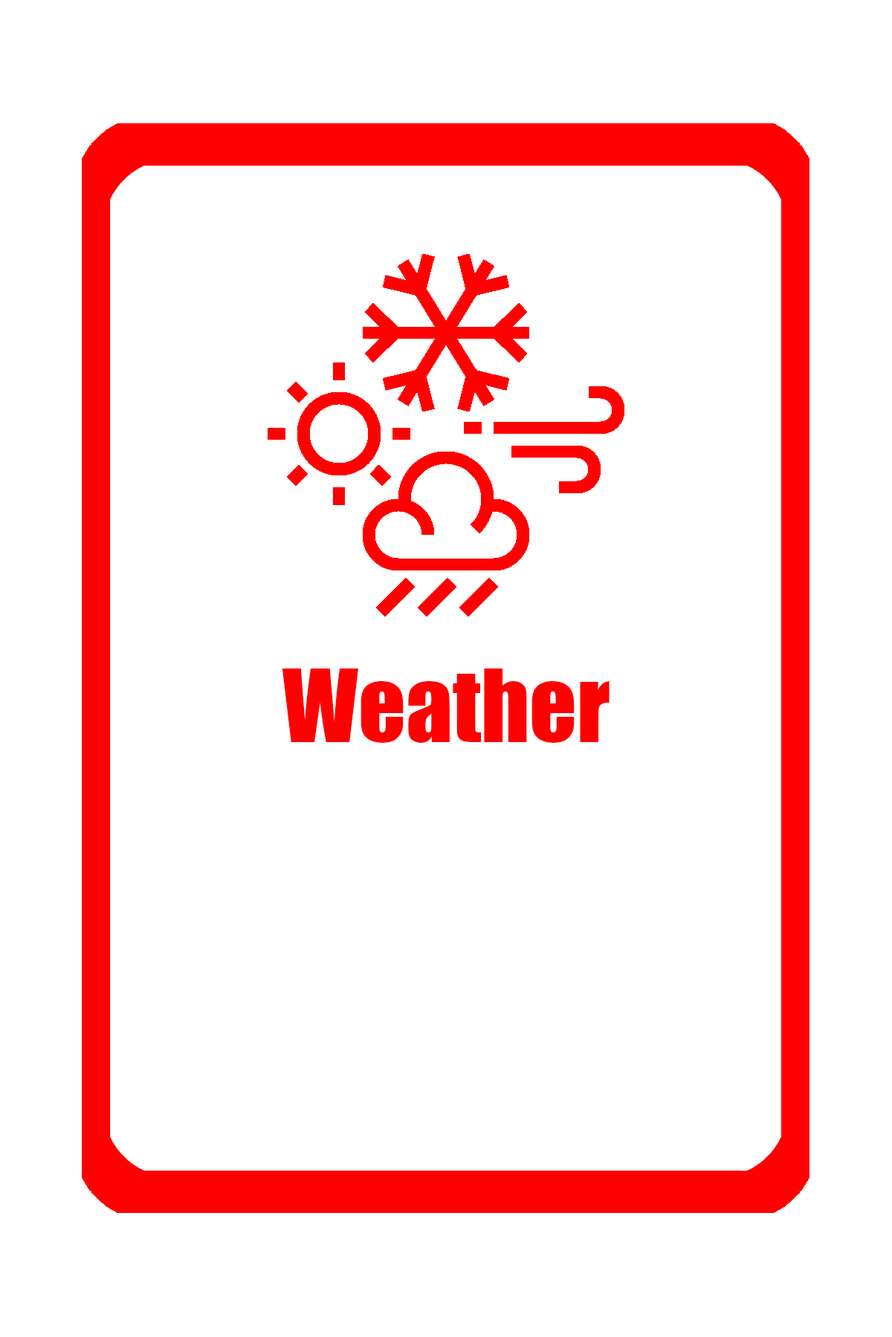
<style>
.page{position:relative;width:892px;height:1337px;background:#ffffff}
.page>*{position:absolute;margin:0}
.t1{font:92.9px "Impact";color:#ff0000}
</style>
<div class="page">
<p class="t1" style="left:282px;top:669px;width:327px;height:74px">Weather</p>
</div>
